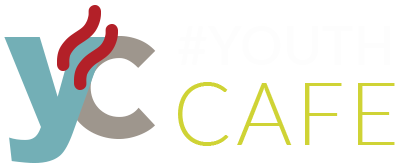
<style>
.page{position:relative;width:400px;height:168px;background:#ffffff}
.page>*{position:absolute;margin:0}
.t1{font:172.9px "Arial-Black";letter-spacing:0.05em;color:#73afb6}
.t2{font:204.5px "Avenir-Heavy";letter-spacing:0.05em}
.t3{font:85.8px "Lato-Light";letter-spacing:0.05em;color:#cfd335}
</style>
<div class="page">
<p class="t1" style="left:4px;top:37px;width:104px;height:126px">y</p>
<p class="t2" style="left:66px;top:36px;width:90px;height:103px">c</p>
<p class="t3" style="left:178px;top:82px;width:217px;height:64px">CAFE</p>
</div>
